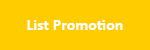
<style>
.page{position:relative;width:150px;height:50px;background:#ffcc00}
.page>*{position:absolute;margin:0}
.t1{font:16px "Calibri-Bold";color:#ffffff}
</style>
<div class="page">
<p class="t1" style="left:27px;top:20px;width:96px;height:10px">List Promotion</p>
</div>
